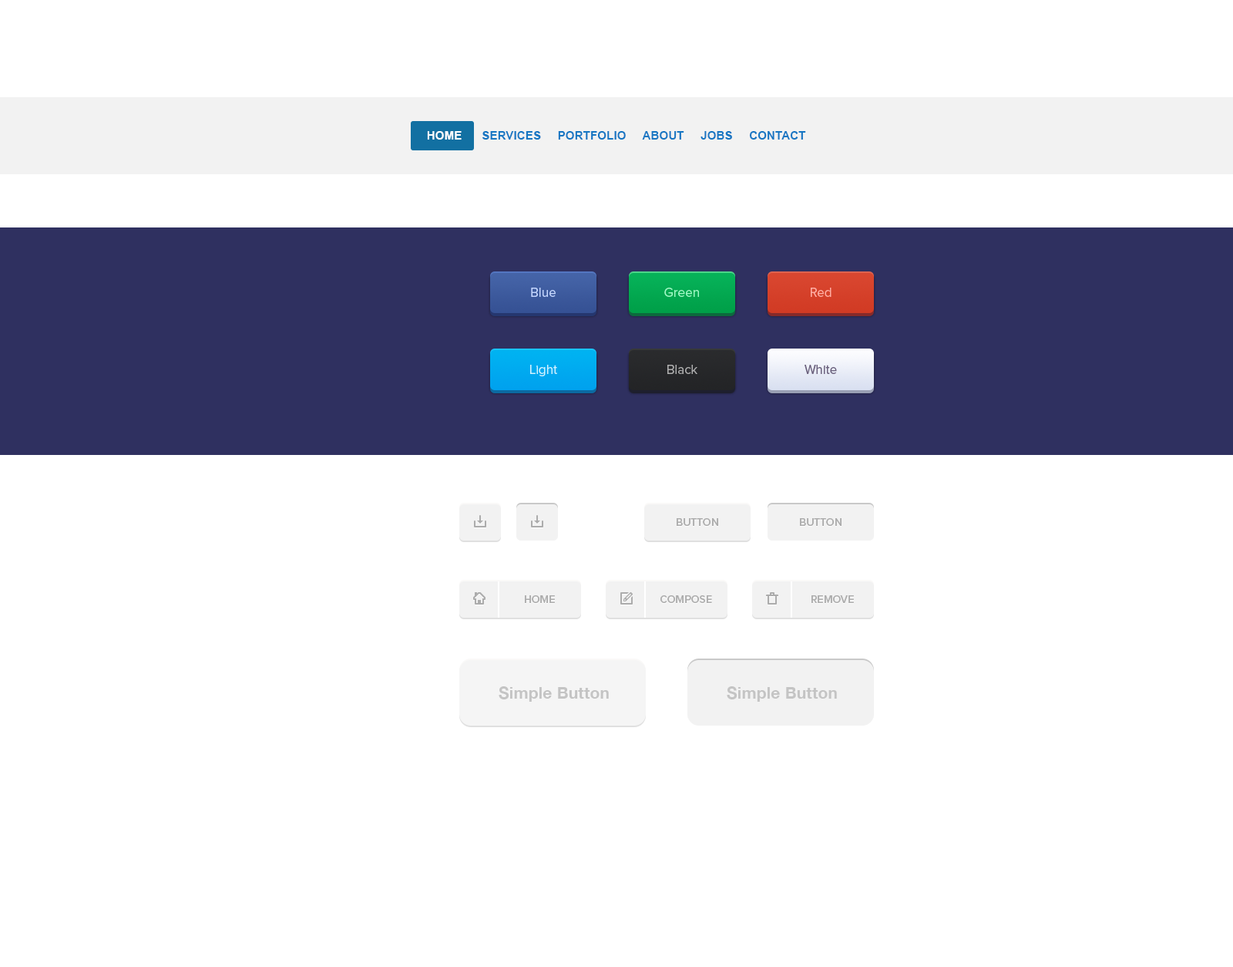
<style>
.page{position:relative;width:1233px;height:967px;background:#ffffff}
.page>*{position:absolute;margin:0}
.t1{font:11.6px "Arial-BoldMT";letter-spacing:0.01em;color:#1576c3;text-transform:uppercase}
.t2{font:11.6px "Arial-BoldMT";letter-spacing:0.01em;color:#ffffff;text-transform:uppercase}
.t3{font:13.4px "ProximaNova-Regular";color:#c6d8ff}
.t4{font:13.4px "ProximaNova-Regular";color:#a4f7c6}
.t5{font:13.4px "ProximaNova-Regular";color:#ffaea5}
.t6{font:13.4px "ProximaNova-Regular";color:#d6f2fe}
.t7{font:13.4px "ProximaNova-Regular";color:#b0b0b0}
.t8{font:13.4px "ProximaNova-Regular";color:#69607b}
.t9{font:11px "ProximaNova-Semibold";color:#acacac;text-transform:uppercase}
.t10{font:16.5px "HelveticaNeue-Bold";letter-spacing:0.01em;color:#c4c4c4}
</style>
<div class="page">
<p class="t1" style="left:427px;top:131px;width:379px;height:9px"><span class="t2">HOME      </span>SERVICES     PORTFOLIO     ABOUT     JOBS     CONTACT</p>
<p class="t3" style="left:531px;top:288px;width:25px;height:9px">Blue</p>
<p class="t4" style="left:665px;top:288px;width:34px;height:9px">Green</p>
<p class="t5" style="left:811px;top:288px;width:21px;height:9px">Red</p>
<p class="t6" style="left:530px;top:365px;width:27px;height:11px">Light</p>
<p class="t7" style="left:668px;top:365px;width:30px;height:9px">Black</p>
<p class="t8" style="left:805px;top:365px;width:32px;height:9px">White</p>
<p class="t9" style="left:677px;top:518px;width:41px;height:8px">Button</p>
<p class="t9" style="left:800px;top:518px;width:42px;height:8px">Button</p>
<p class="t9" style="left:525px;top:595px;width:30px;height:8px">home</p>
<p class="t9" style="left:661px;top:595px;width:51px;height:8px">compose</p>
<p class="t9" style="left:812px;top:595px;width:42px;height:8px">remove</p>
<p class="t10" style="left:499px;top:686px;width:110px;height:16px">Simple Button</p>
<p class="t10" style="left:727px;top:686px;width:110px;height:16px">Simple Button</p>
</div>
